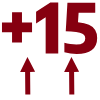
<style>
.page{position:relative;width:100px;height:100px;background:#ffffff}
.page>*{position:absolute;margin:0}
.t1{font:68.6px "EncodeSansSemiCondensed-ExtraBold";color:#860010}
</style>
<div class="page">
<p class="t1" style="left:1px;top:2px;width:97px;height:53px">+15</p>
</div>
